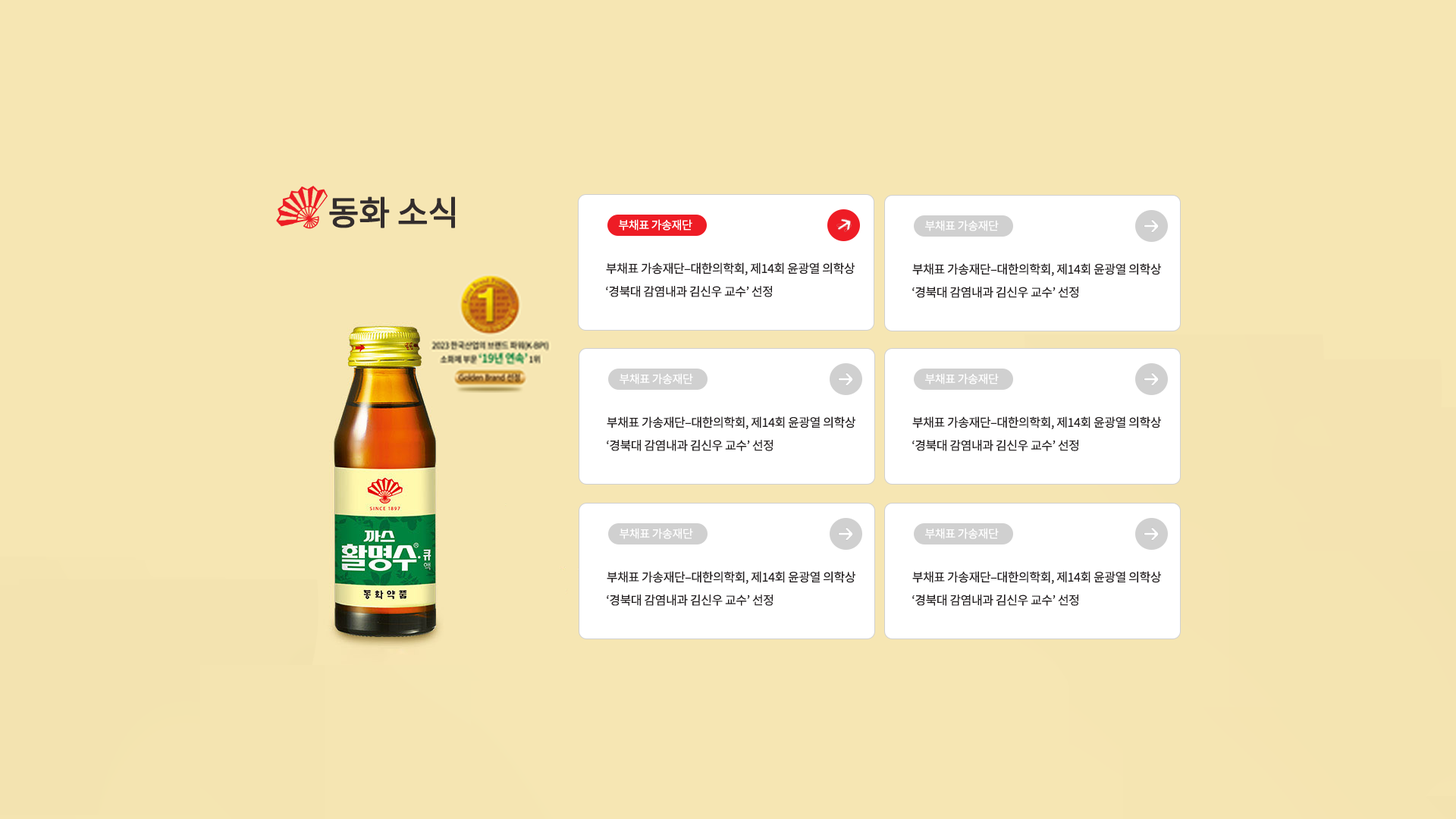
<style>
.page{position:relative;width:1456px;height:819px;background:#f6e6b3}
.page>*{position:absolute;margin:0}
.t1{font:33.4px "NotoSansKR-Regular";letter-spacing:-0.025em;color:#332d2d;font-weight:bold}
.t2{font:11.4px "NotoSansKR-Regular";letter-spacing:-0.025em;color:#ffffff}
.t3{font:12.1px "NotoSansKR-Regular";letter-spacing:-0.025em;color:#231f20}
</style>
<div class="page">
<p class="t1" style="left:329px;top:196px;width:126px;height:32px">동화 소식</p>
<p class="t2" style="left:619px;top:219px;width:73px;height:12px">부채표 가송재단</p>
<p class="t2" style="left:925px;top:220px;width:74px;height:11px">부채표 가송재단</p>
<p class="t3" style="left:606px;top:262px;width:249px;height:13px">부채표 가송재단–대한의학회, 제14회 윤광열 의학상</p>
<p class="t3" style="left:912px;top:263px;width:249px;height:13px">부채표 가송재단–대한의학회, 제14회 윤광열 의학상</p>
<p class="t3" style="left:606px;top:286px;width:166px;height:11px">‘경북대 감염내과 김신우 교수’ 선정</p>
<p class="t3" style="left:912px;top:287px;width:166px;height:11px">‘경북대 감염내과 김신우 교수’ 선정</p>
<p class="t2" style="left:620px;top:373px;width:73px;height:11px">부채표 가송재단</p>
<p class="t2" style="left:925px;top:373px;width:74px;height:11px">부채표 가송재단</p>
<p class="t3" style="left:607px;top:416px;width:248px;height:13px">부채표 가송재단–대한의학회, 제14회 윤광열 의학상</p>
<p class="t3" style="left:912px;top:416px;width:249px;height:13px">부채표 가송재단–대한의학회, 제14회 윤광열 의학상</p>
<p class="t3" style="left:607px;top:440px;width:166px;height:11px">‘경북대 감염내과 김신우 교수’ 선정</p>
<p class="t3" style="left:912px;top:440px;width:166px;height:11px">‘경북대 감염내과 김신우 교수’ 선정</p>
<p class="t2" style="left:620px;top:528px;width:73px;height:11px">부채표 가송재단</p>
<p class="t2" style="left:925px;top:528px;width:74px;height:11px">부채표 가송재단</p>
<p class="t3" style="left:607px;top:571px;width:248px;height:13px">부채표 가송재단–대한의학회, 제14회 윤광열 의학상</p>
<p class="t3" style="left:912px;top:571px;width:249px;height:13px">부채표 가송재단–대한의학회, 제14회 윤광열 의학상</p>
<p class="t3" style="left:607px;top:595px;width:166px;height:11px">‘경북대 감염내과 김신우 교수’ 선정</p>
<p class="t3" style="left:912px;top:595px;width:166px;height:11px">‘경북대 감염내과 김신우 교수’ 선정</p>
</div>
